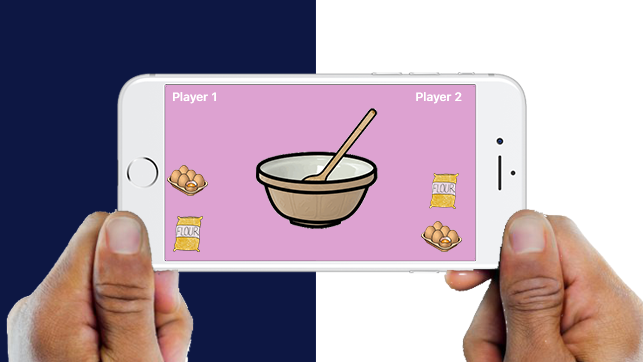
<style>
.page{position:relative;width:643px;height:362px;background:#ffffff}
.page>*{position:absolute;margin:0}
.t1{font:12px "SFProText-Medium";color:#ffffff}
</style>
<div class="page">
<p class="t1" style="left:173px;top:92px;width:43px;height:12px">Player 1</p>
<p class="t1" style="left:416px;top:92px;width:46px;height:12px">Player 2</p>
</div>
